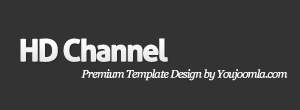
<style>
.page{position:relative;width:300px;height:110px;background:#333333}
.page>*{position:absolute;margin:0}
.t1{font:30px "Aller-Bold";letter-spacing:-0.075em;color:#ffffff;font-weight:bold}
.t2{font:11px "Georgia-Italic";letter-spacing:-0.075em;color:#ffffff;font-weight:bold}
</style>
<div class="page">
<p class="t1" style="left:20px;top:38px;width:148px;height:24px">HD Channel</p>
<p class="t2" style="left:81px;top:69px;width:207px;height:12px">Premium Template Design by Youjoomla.com</p>
</div>
